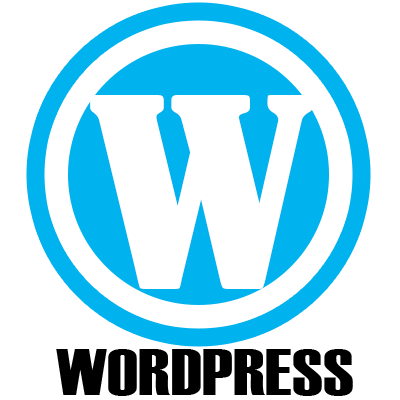
<style>
.page{position:relative;width:400px;height:400px;background:#ffffff}
.page>*{position:absolute;margin:0}
.t1{font:288.3px "BernardMT-Condensed";color:#ffffff;scale:1.25 1}
.t2{font:65px "Haettenschweiler";color:#000000;scale:1.25 1}
</style>
<div class="page">
<p class="t1" style="left:90px;top:95px;width:224px;height:194px">w</p>
<p class="t2" style="left:56px;top:349px;width:297px;height:47px">WORDPRESS</p>
</div>
